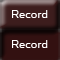
<style>
.page{position:relative;width:60px;height:60px;background:#331111}
.page>*{position:absolute;margin:0}
.t1{font:13.3px "SimianText-Orangutan";color:#ffffff}
</style>
<div class="page">
<p class="t1" style="left:12px;top:10px;width:36px;height:8px">Record</p>
<p class="t1" style="left:12px;top:40px;width:36px;height:8px">Record</p>
</div>
